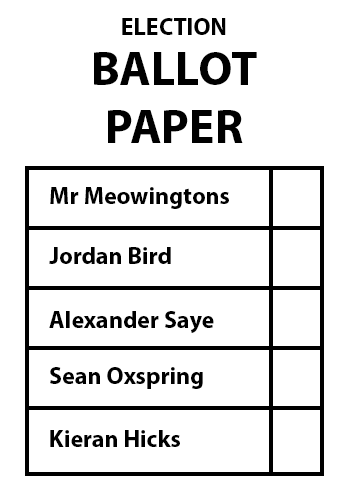
<style>
.page{position:relative;width:350px;height:500px;background:#ffffff}
.page>*{position:absolute;margin:0}
.t1{font:24px "MyriadPro-Bold";color:#000000}
.t2{font:48px "MyriadPro-Bold";color:#000000}
</style>
<div class="page">
<p class="t1" style="left:122px;top:18px;width:104px;height:17px">ELECTION</p>
<p class="t2" style="left:94px;top:52px;width:163px;height:91px;text-align:center">BALLOT<br>PAPER</p>
<p class="t1" style="left:50px;top:187px;width:179px;height:22px">Mr Meowingtons</p>
<p class="t1" style="left:49px;top:247px;width:122px;height:17px">Jordan Bird</p>
<p class="t1" style="left:49px;top:311px;width:165px;height:22px">Alexander Saye</p>
<p class="t1" style="left:50px;top:367px;width:153px;height:22px">Sean Oxspring</p>
<p class="t1" style="left:50px;top:430px;width:130px;height:17px">Kieran Hicks</p>
</div>
